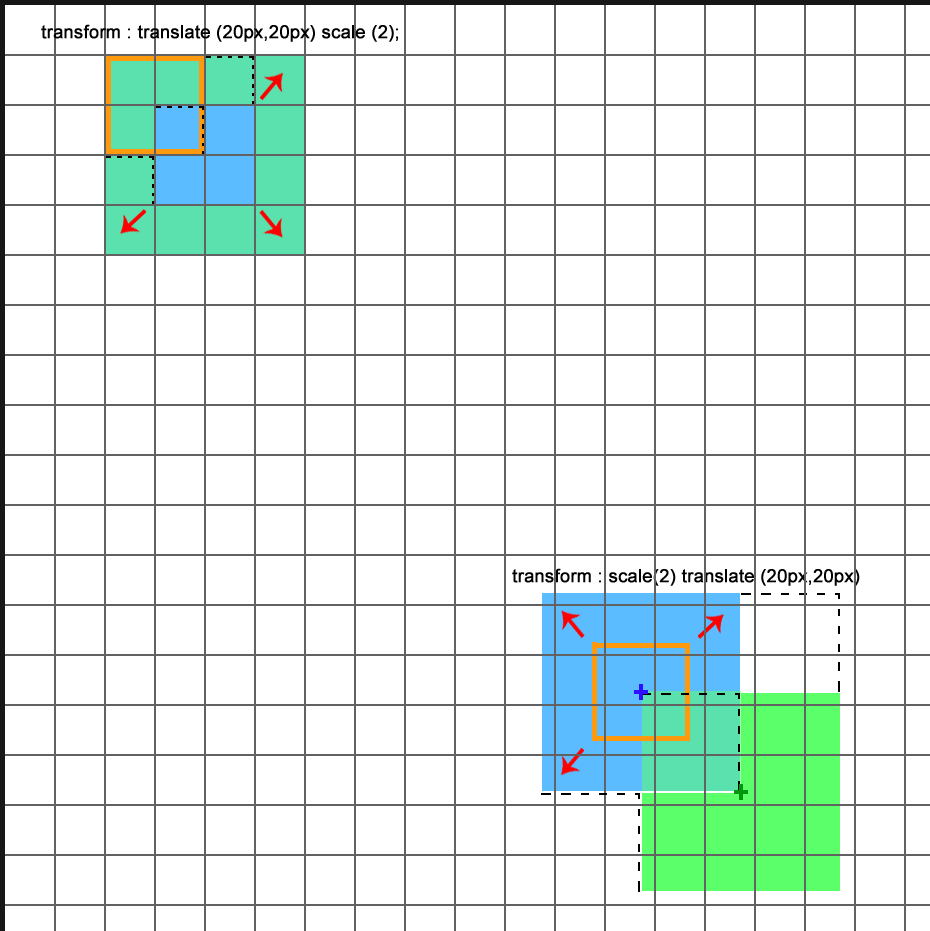
<style>
.page{position:relative;width:930px;height:931px;background:#ffffff}
.page>*{position:absolute;margin:0}
.t1{font:17.9px "ArialMT";color:#000000;font-weight:bold}
</style>
<div class="page">
<p class="t1" style="left:41px;top:24px;width:357px;height:18px">transform : translate (20px,20px) scale (2);</p>
<p class="t1" style="left:512px;top:568px;width:348px;height:18px">transform : scale(2) translate (20px,20px)</p>
</div>
